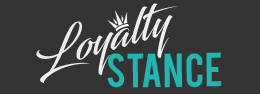
<style>
.page{position:relative;width:260px;height:94px;background:#333333}
.page>*{position:absolute;margin:0}
.t1{font:44.9px "Blacksword";color:#eeeeee}
.t2{font:37.3px "Bebas";color:#1eb7b1}
</style>
<div class="page">
<p class="t1" style="left:36px;top:3px;width:142px;height:81px;rotate:-16deg">Loyalty</p>
<p class="t2" style="left:107px;top:52px;width:114px;height:36px">Stance</p>
</div>
